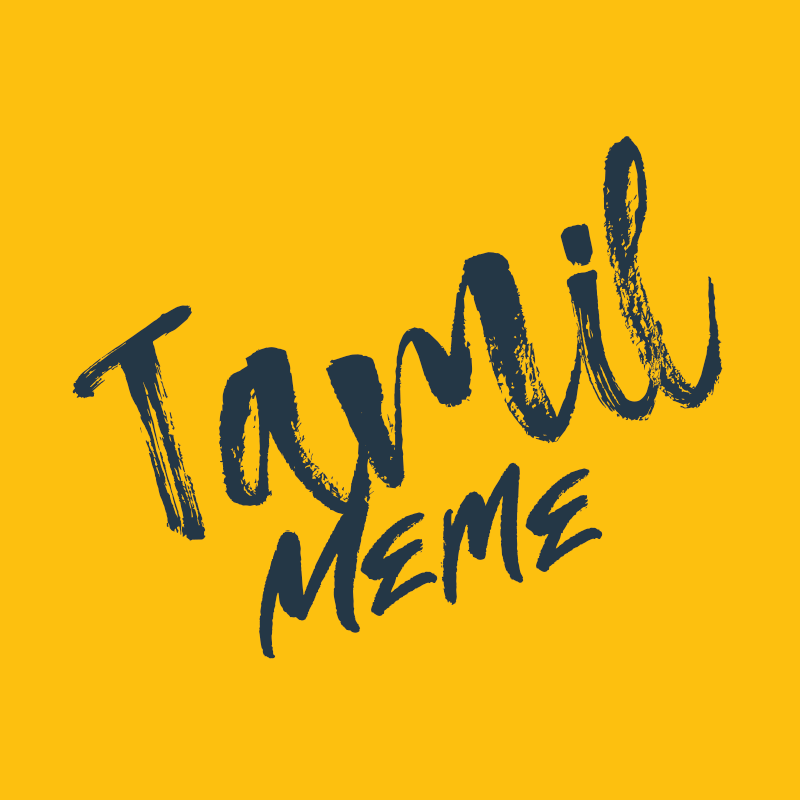
<style>
.page{position:relative;width:800px;height:800px;background:#fdc00f}
.page>*{position:absolute;margin:0}
.t1{font:327.8px "AtmosphereScriptTypeface";color:#243746}
.t2{font:192.6px "Oh-Now!";color:#243746}
</style>
<div class="page">
<p class="t1" style="left:72px;top:136px;width:651px;height:405px;rotate:-15deg">Tamil</p>
<p class="t2" style="left:258px;top:462px;width:345px;height:197px;rotate:-15deg">Meme</p>
</div>
